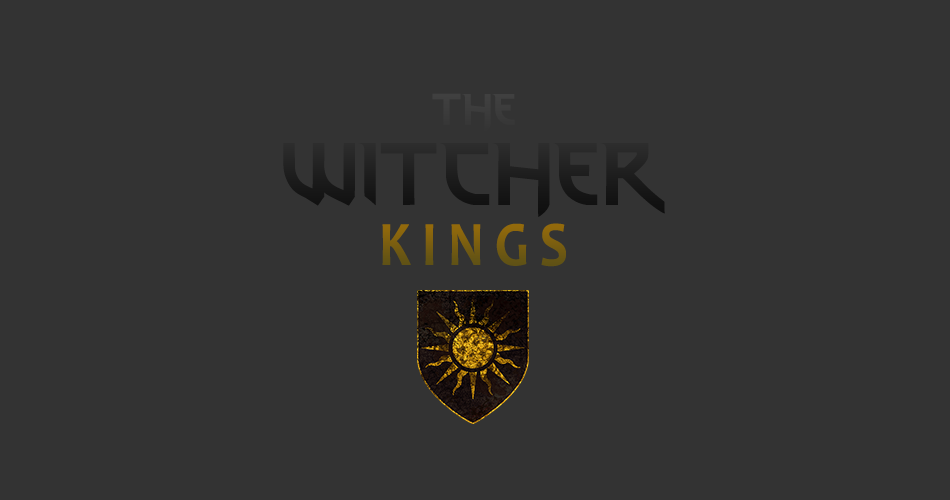
<style>
.page{position:relative;width:950px;height:500px;background:#333333}
.page>*{position:absolute;margin:0}
.t1{font:96px/80px "thewitcher";color:#202020;font-variant:small-caps}
.t2{font:48px/80px "thewitcher";color:#202020;font-variant:small-caps}
.t3{font:64px "Candara-Bold";letter-spacing:0.2em;font-variant:small-caps;scale:0.85 1}
</style>
<div class="page">
<p class="t1" style="left:283px;top:93px;width:382px;height:124px;text-align:center"><span class="t2">THE<br></span>WITCHER</p>
<p class="t3" style="left:382px;top:223px;width:184px;height:44px">KINGS</p>
</div>
